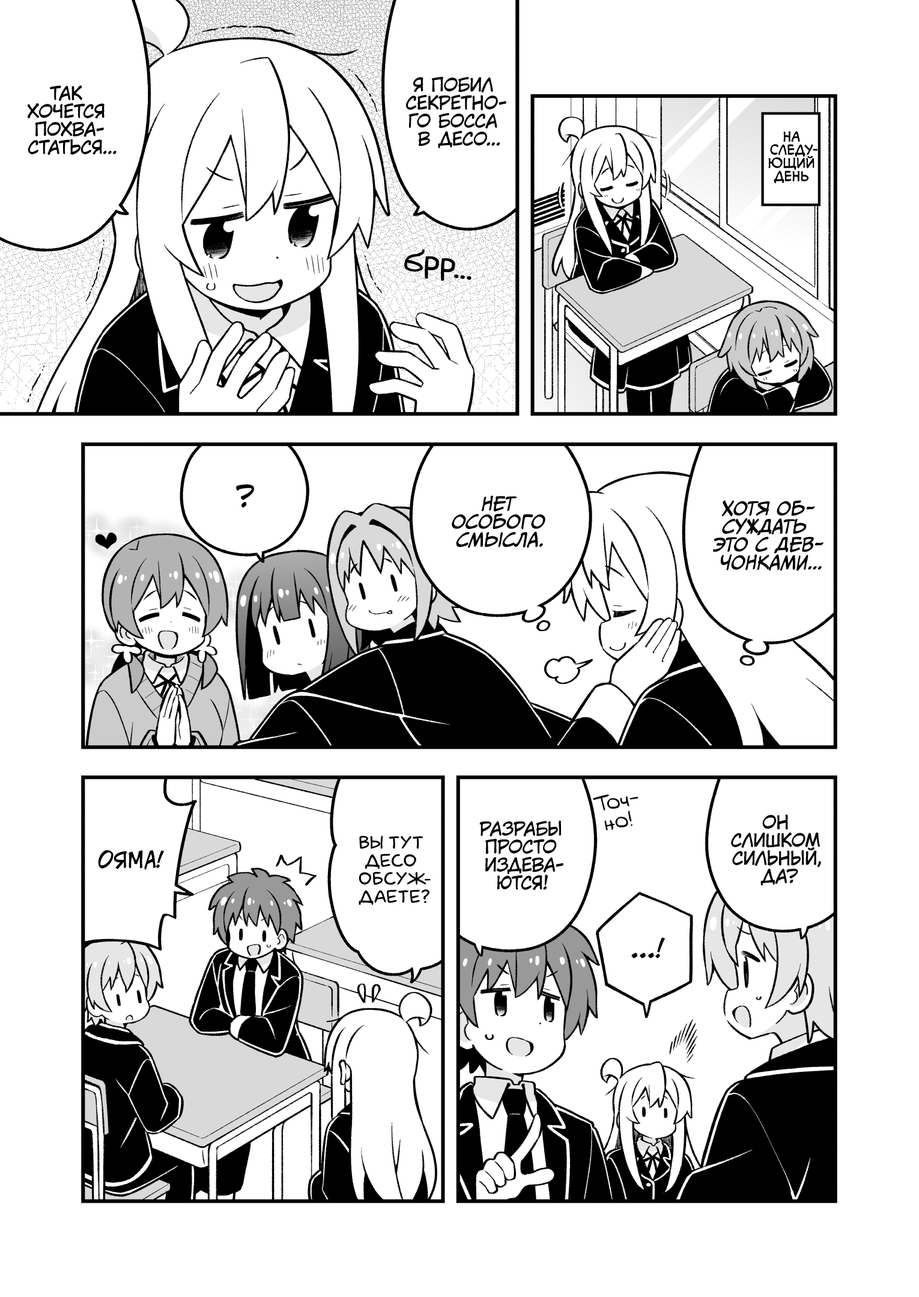
<style>
.page{position:relative;width:919px;height:1297px;background:#ffffff}
.page>*{position:absolute;margin:0}
.t1{font:18px "KuraiVoice2";color:#000000;text-transform:uppercase}
.t2{font:13.2px "v_CCMonologous";color:#000000;text-transform:uppercase}
.t3{font:36px "v_Augie";color:#000000}
.t4{font:28.8px "KuraiVoice2";color:#000000;text-transform:uppercase}
.t5{font:18px "CCMeanwhile";color:#000000;text-transform:uppercase;font-style:italic}
.t6{font:19.8px "v_Augie";color:#000000}
.t7{font:18px "laCartoonerie";color:#000000;text-transform:uppercase}
.t8{font:21.6px "v_CCJeffCampbell";color:#000000;text-transform:uppercase}
.t9{font:25.2px "v_CCJeffCampbell";color:#000000;text-transform:uppercase}
</style>
<div class="page">
<p class="t1" style="left:406px;top:76px;width:100px;height:72px;text-align:center">Я побил<br>секретно-<br>го босса<br>в Десо...</p>
<p class="t1" style="left:28px;top:85px;width:89px;height:70px;text-align:center">Так<br>хочется<br>похва-<br>статься...</p>
<p class="t2" style="left:768px;top:131px;width:50px;height:52px;text-align:center">На<br>следу-<br>ющий<br>день</p>
<p class="t3" style="left:404px;top:249px;width:68px;height:32px;rotate:7deg">брр...</p>
<p class="t4" style="left:236px;top:484px;width:18px;height:24px">?</p>
<p class="t5" style="left:452px;top:496px;width:93px;height:52px;text-align:center">нет<br>особого<br>смысла.</p>
<p class="t5" style="left:713px;top:500px;width:111px;height:71px;text-align:center">Хотя об-<br>суждать<br>это с дев-<br>чонками...</p>
<p class="t6" style="left:593px;top:795px;width:46px;height:36px;text-align:center;rotate:-10deg">Точ-<br>но!</p>
<p class="t1" style="left:479px;top:821px;width:84px;height:69px;text-align:center">Разрабы<br>просто<br>издева-<br>ются!</p>
<p class="t1" style="left:731px;top:815px;width:90px;height:71px;text-align:center">Он<br>слишком<br>сильный,<br>да?</p>
<p class="t7" style="left:359px;top:836px;width:72px;height:69px;text-align:center">Вы тут<br>Десо<br>обсуж-<br>даете?</p>
<p class="t8" style="left:98px;top:851px;width:66px;height:19px">Ояма!</p>
<p class="t9" style="left:631px;top:938px;width:34px;height:21px">...!</p>
</div>
